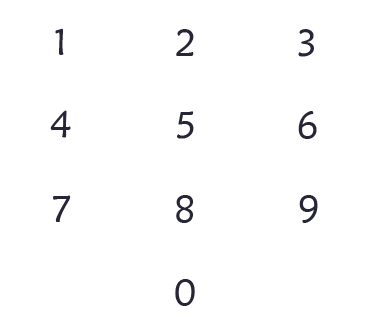
<style>
.page{position:relative;width:366px;height:331px;background:#ffffff}
.page>*{position:absolute;margin:0}
.t1{font:37.5px "STXinwei";color:#272636}
</style>
<div class="page">
<p class="t1" style="left:55px;top:28px;width:9px;height:27px">1</p>
<p class="t1" style="left:176px;top:29px;width:18px;height:27px">2</p>
<p class="t1" style="left:298px;top:29px;width:16px;height:28px">3</p>
<p class="t1" style="left:50px;top:110px;width:21px;height:28px">4</p>
<p class="t1" style="left:177px;top:111px;width:17px;height:28px">5</p>
<p class="t1" style="left:298px;top:111px;width:19px;height:28px">6</p>
<p class="t1" style="left:53px;top:195px;width:18px;height:27px">7</p>
<p class="t1" style="left:176px;top:195px;width:17px;height:28px">8</p>
<p class="t1" style="left:299px;top:195px;width:19px;height:28px">9</p>
<p class="t1" style="left:175px;top:279px;width:20px;height:27px">0</p>
</div>
